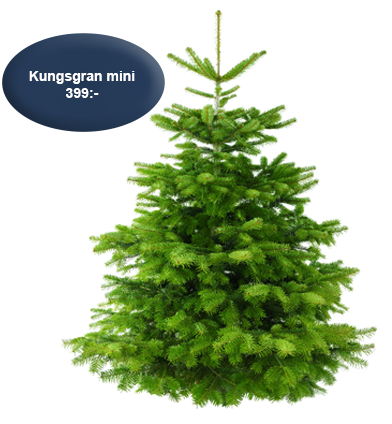
<style>
.page{position:relative;width:392px;height:424px;background:#ffffff}
.page>*{position:absolute;margin:0}
.t1{font:14px "Arial-BoldMT";color:#ffffff}
</style>
<div class="page">
<p class="t1" style="left:29px;top:71px;width:106px;height:27px;text-align:center">Kungsgran mini<br>399:-</p>
</div>
